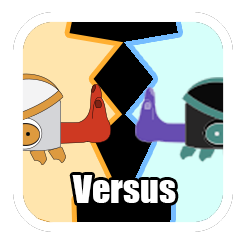
<style>
.page{position:relative;width:246px;height:245px;background:#ffffff}
.page>*{position:absolute;margin:0}
.t1{font:36px "Impact";color:#ffffff}
</style>
<div class="page">
<p class="t1" style="left:72px;top:175px;width:104px;height:28px">Versus</p>
</div>
